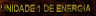
<style>
.page{position:relative;width:96px;height:16px}
.page>*{position:absolute;margin:0}
.t1{font:10px "Arial-BoldMT";text-transform:uppercase;scale:0.76 1}
</style>
<div class="page">
<p class="t1" style="left:1px;top:4px;width:90px;height:8px">unidade 1 de energia</p>
</div>
